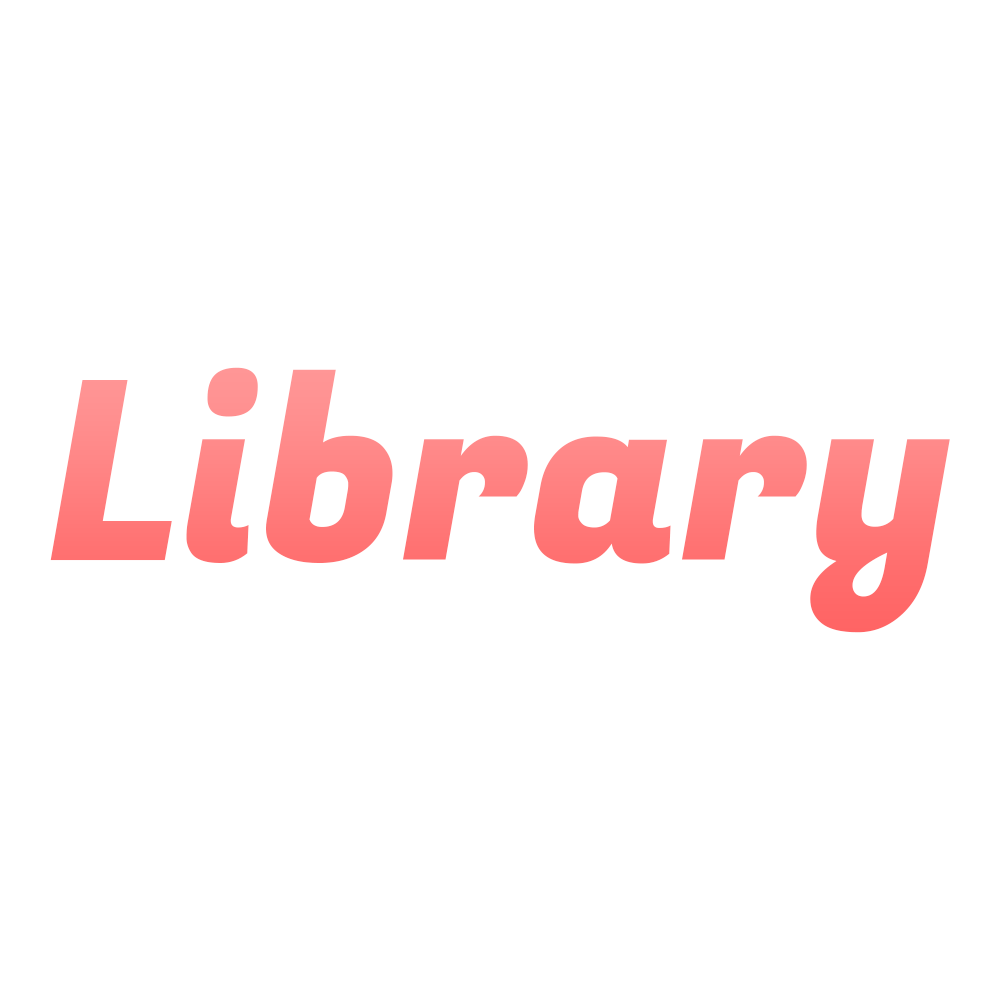
<style>
.page{position:relative;width:1000px;height:1000px;background:#ffffff}
.page>*{position:absolute;margin:0}
.t1{font:250px "FugazOne-Regular";color:#ff7e7e}
</style>
<div class="page">
<p class="t1" style="left:50px;top:367px;width:900px;height:266px">Library</p>
</div>
